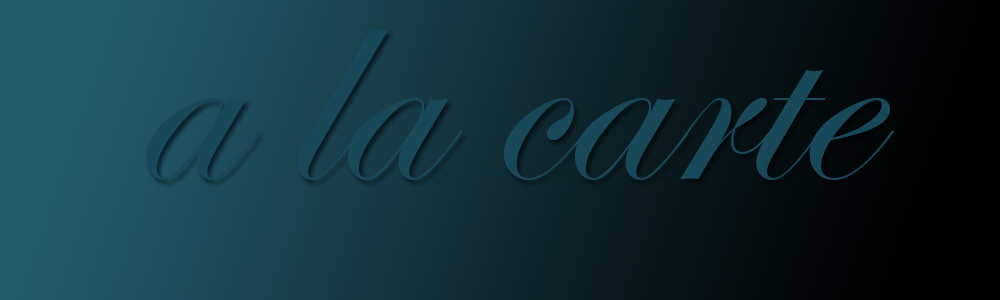
<style>
.page{position:relative;width:1000px;height:300px}
.page>*{position:absolute;margin:0}
.t1{font:297.2px "EdwardianScriptITC";color:#194a59}
</style>
<div class="page">
<p class="t1" style="left:146px;top:28px;width:749px;height:152px">a la carte</p>
</div>
